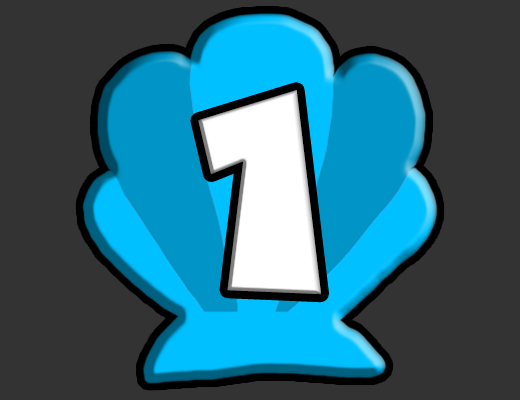
<style>
.page{position:relative;width:520px;height:400px;background:#333333}
.page>*{position:absolute;margin:0}
.t1{font:279.4px "Funhouse";color:#ffffff}
</style>
<div class="page">
<p class="t1" style="left:198px;top:90px;width:123px;height:205px">1</p>
</div>
